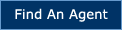
<style>
.page{position:relative;width:122px;height:30px;background:#003366}
.page>*{position:absolute;margin:0}
.t1{font:13px "Verdana";letter-spacing:0.01em;color:#ffffff}
</style>
<div class="page">
<p class="t1" style="left:15px;top:8px;width:93px;height:14px">Find An Agent</p>
</div>
